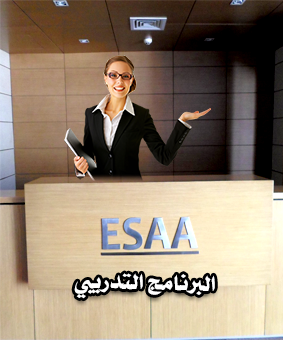
<style>
.page{position:relative;width:283px;height:340px}
.page>*{position:absolute;margin:0}
.t1{font:24.5px "Sultan-bold";color:#fefefe;scale:1.19 1}
</style>
<div class="page">
<p class="t1" style="left:74px;top:273px;width:141px;height:26px;rotate:1deg">البرنامج التدريبي</p>
</div>
